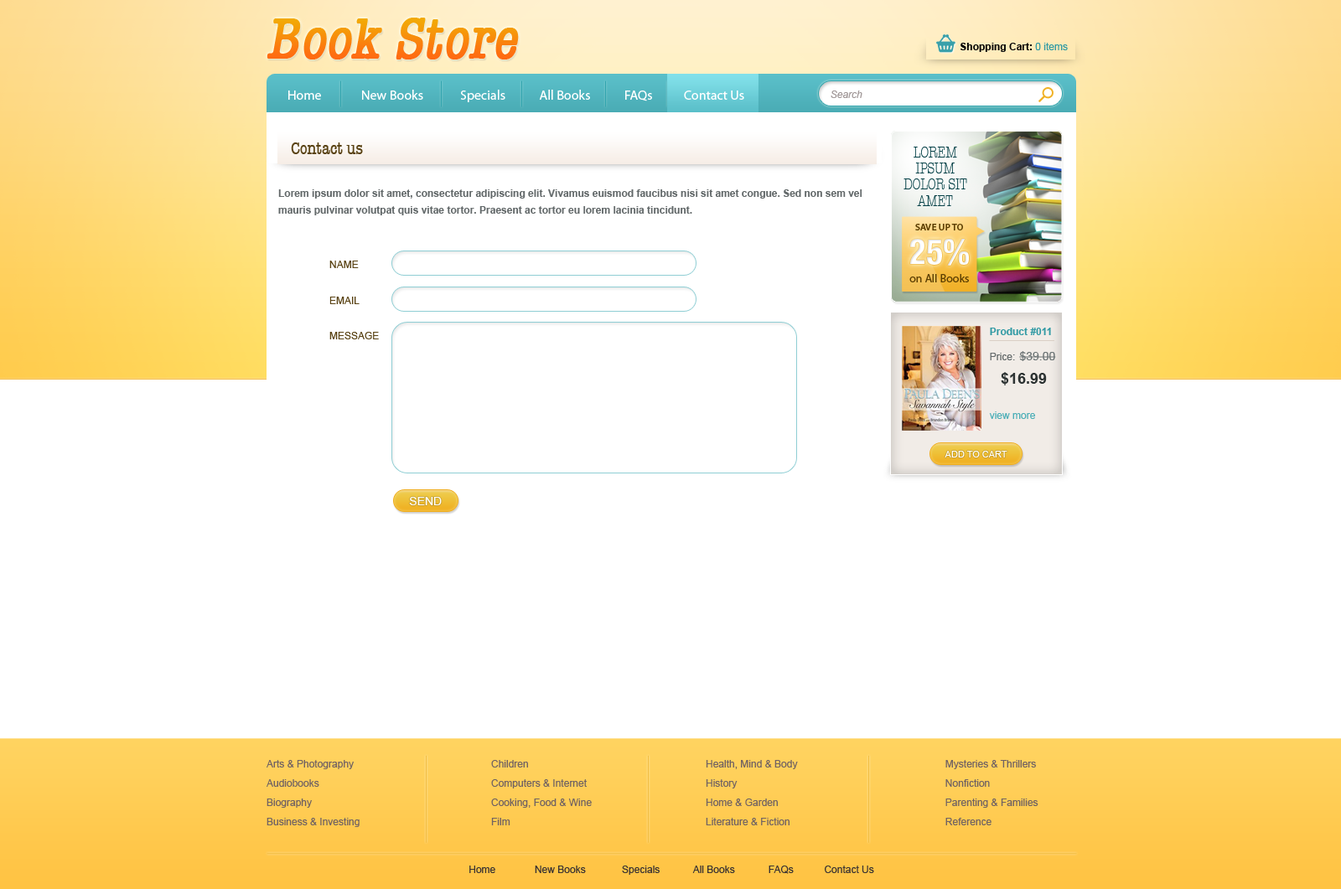
<style>
.page{position:relative;width:1341px;height:889px;background:#ffffff}
.page>*{position:absolute;margin:0}
.t1{font:60.3px "AmericanTypewLH-MedCond";font-weight:bold;font-style:italic}
.t2{font:10.1px "Arial-BoldMT";color:#040505}
.t3{font:10.1px "ArialMT";color:#319aa4}
.t4{font:13.4px "MyriadPro-Regular";color:#ffffff}
.t5{font:10.1px "Arial-ItalicMT";color:#a19898}
.t6{font:18.4px "AmericanTypewLH-MedCond";color:#594213}
.t7{font:16.1px/16.1px "AmericanTypewLH-LightCond";color:#034046;text-transform:uppercase}
.t8{font:10.1px/16.8px "Arial-BoldMT";color:#63696a}
.t9{font:11.7px/15.1px "MyriadPro-Regular";color:#5c3f02}
.t10{font:9.6px "MyriadPro-Semibold";color:#5c3f02;text-transform:uppercase}
.t11{font:9.6px/6.4px "MyriadPro-Semibold";color:#5c3f02;text-transform:uppercase}
.t12{font:34.3px "HelveticaNeueLTStd-BdCn";color:#fcfcfc}
.t13{font:10.1px "ArialMT";color:#594213;text-transform:uppercase}
.t14{font:10.1px/20.1px "ArialMT";color:#4caeb7}
.t15{font:10.1px/20.1px "Arial-BoldMT";color:#319aa4}
.t16{font:10.1px/25.1px "Arial-BoldMT";color:#319aa4}
.t17{font:10.1px/25.1px "ArialMT";color:#63696a}
.t18{font:11.7px/25.1px "ArialMT";color:#6b7374}
.t19{font:15.1px/11.7px "Arial-BoldMT";color:#2d3333}
.t20{font:9.2px "ArialMT";color:#ffffff;text-transform:uppercase}
.t21{font:11.7px "ArialMT";color:#ffffff;text-transform:uppercase}
.t22{font:10.1px/19.3px "ArialMT";color:#706262}
.t23{font:10.1px "ArialMT";color:#393232}
</style>
<div class="page">
<p class="t1" style="left:267px;top:18px;width:252px;height:42px">Book Store</p>
<p class="t2" style="left:960px;top:43px;width:108px;height:9px">Shopping Cart: <span class="t3">0 items</span></p>
<p class="t4" style="left:288px;top:90px;width:456px;height:12px">Home              New Books             Specials            All Books            FAQs           Contact Us</p>
<p class="t5" style="left:831px;top:91px;width:31px;height:7px">Search</p>
<p class="t6" style="left:291px;top:142px;width:72px;height:12px">Contact us</p>
<p class="t7" style="left:903px;top:147px;width:64px;height:59px;text-align:center">Lorem Ipsum<br>Dolor Sit Amet</p>
<p class="t8" style="left:278px;top:189px;width:584px;height:26px">Lorem ipsum dolor sit amet, consectetur adipiscing elit. Vivamus euismod faucibus nisi sit amet congue. Sed non sem vel mauris pulvinar volutpat quis vitae tortor. Praesent ac tortor eu lorem lacinia tincidunt.</p>
<p class="t9" style="left:909px;top:224px;width:60px;height:58px;text-align:center"><span class="t10">Save up t</span><span class="t11">o <br><br><br></span><br>on All Books</p>
<p class="t12" style="left:910px;top:239px;width:59px;height:27px">25%</p>
<p class="t13" style="left:329px;top:261px;width:30px;height:7px">Name</p>
<p class="t13" style="left:329px;top:297px;width:31px;height:7px">Email</p>
<p class="t14" style="left:989px;top:328px;width:67px;height:91px"><span class="t15">Prod</span><span class="t16">uct #011<br></span><span class="t17">Price: </span><span class="t18">$39.00<br><br>    </span><span class="t19">$16.99<br><br></span>view more</p>
<p class="t13" style="left:329px;top:332px;width:50px;height:7px">Message</p>
<p class="t20" style="left:945px;top:451px;width:62px;height:7px">add to cart</p>
<p class="t21" style="left:409px;top:497px;width:33px;height:8px">Send</p>
<p class="t22" style="left:267px;top:760px;width:93px;height:67px">Arts &amp; Photography<br>Audiobooks<br>Biography<br>Business &amp; Investing</p>
<p class="t22" style="left:491px;top:760px;width:101px;height:66px">Children<br>Computers &amp; Internet<br>Cooking, Food &amp; Wine<br>Film</p>
<p class="t22" style="left:706px;top:760px;width:92px;height:66px">Health, Mind &amp; Body<br>History<br>Home &amp; Garden<br>Literature &amp; Fiction</p>
<p class="t22" style="left:945px;top:760px;width:93px;height:66px">Mysteries &amp; Thrillers<br>Nonfiction<br>Parenting &amp; Families<br>Reference</p>
<p class="t23" style="left:469px;top:866px;width:405px;height:9px">Home              New Books             Specials            All Books            FAQs           Contact Us</p>
</div>
